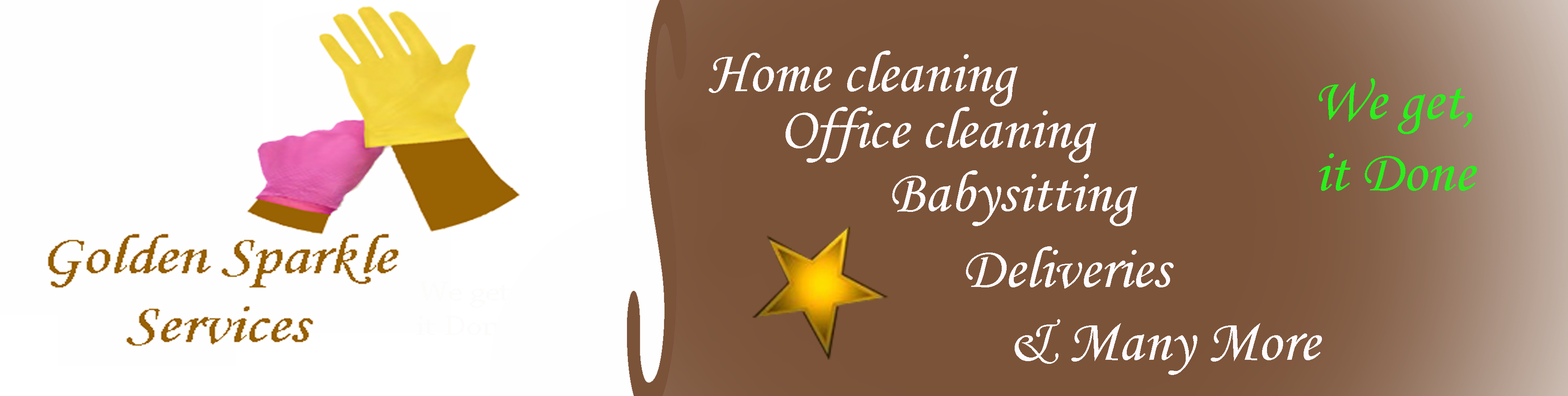
<style>
.page{position:relative;width:1568px;height:396px;background:#fefefe}
.page>*{position:absolute;margin:0}
.t1{font:59.5px "MonotypeCorsiva";color:#fefbfe}
.t2{font:59.5px "MonotypeCorsiva";color:#2cee1d}
</style>
<div class="page">
<p class="t1" style="left:709px;top:50px;width:309px;height:56px">Home cleaning</p>
<p class="t2" style="left:1319px;top:78px;width:158px;height:113px;text-align:center">We get,<br>it Done</p>
<p class="t1" style="left:786px;top:107px;width:310px;height:56px">Office cleaning</p>
<p class="t1" style="left:892px;top:170px;width:245px;height:56px">Babysitting</p>
<p class="t1" style="left:966px;top:246px;width:208px;height:43px">Deliveries</p>
<p class="t1" style="left:1015px;top:319px;width:307px;height:56px">&amp; Many More</p>
</div>
